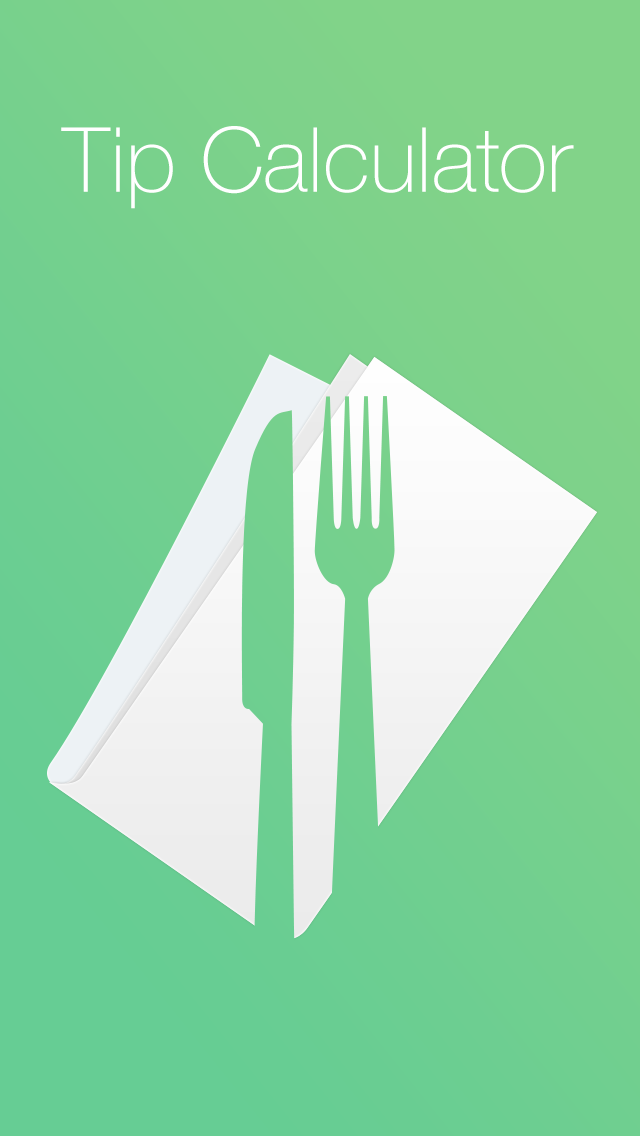
<style>
.page{position:relative;width:640px;height:1136px}
.page>*{position:absolute;margin:0}
.t1{font:90px "HelveticaNeue-Thin";color:#ffffff}
</style>
<div class="page">
<p class="t1" style="left:61px;top:126px;width:513px;height:83px">Tip Calculator</p>
</div>
